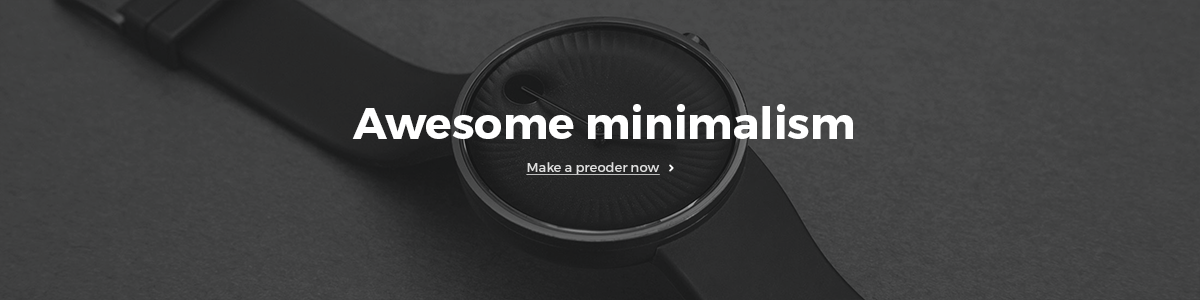
<style>
.page{position:relative;width:1200px;height:300px}
.page>*{position:absolute;margin:0}
.t1{font:44px "Montserrat-Bold";color:#ffffff}
.t2{font:13px "Montserrat-Regular";color:#dfdfdf;text-decoration:underline}
</style>
<div class="page">
<p class="t1" style="left:352px;top:104px;width:501px;height:35px">Awesome minimalism</p>
<p class="t2" style="left:526px;top:162px;width:134px;height:13px">Make a preoder now</p>
</div>
